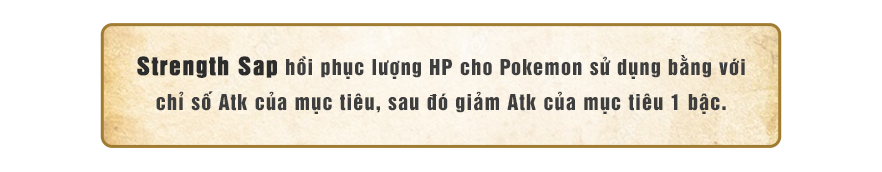
<style>
.page{position:relative;width:882px;height:172px;background:#ffffff}
.page>*{position:absolute;margin:0}
.t1{font:20px/35px "UTM-HelvetIns";letter-spacing:0.06em;color:#3e3e3e}
.t2{font:23px/35px "UTM-HelvetIns";letter-spacing:0.06em;color:#2c2c2c;font-weight:bold}
</style>
<div class="page">
<p class="t1" style="left:137px;top:55px;width:608px;height:59px;text-align:center"><span class="t2">Strength Sap </span>hồi phục lượng HP cho Pokemon sử dụng bằng với <br>chỉ số Atk của mục tiêu, sau đó giảm Atk của mục tiêu 1 bậc.</p>
</div>
